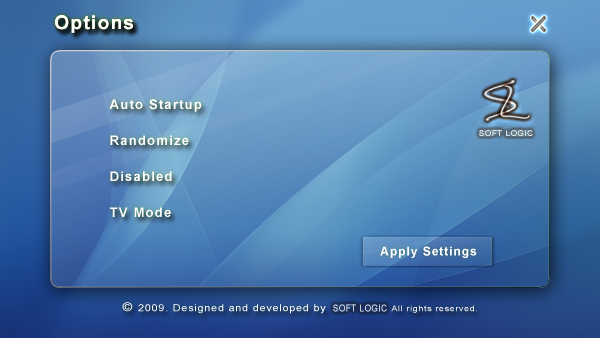
<style>
.page{position:relative;width:600px;height:338px}
.page>*{position:absolute;margin:0}
.t1{font:18.7px "Arial-BoldMT";letter-spacing:0.08em;color:#fefefe}
.t2{font:13.3px/18px "Arial-BoldMT";letter-spacing:0.08em;color:#fefefe}
.t3{font:8px "ArialMT";letter-spacing:0.08em}
.t4{font:12px "Arial-BoldMT";letter-spacing:0.08em;color:#ffffff}
.t5{font:9.7px "ArialMT";letter-spacing:0.08em;color:#fefefe;scale:1.1 1}
.t6{font:12px "ArialMT";letter-spacing:0.08em;color:#fefefe;scale:1.1 1}
.t7{font:9.8px "ArialMT";letter-spacing:0.08em;scale:0.82 1}
.t8{font:8px "ArialMT";letter-spacing:0.08em;scale:1.1 1}
</style>
<div class="page">
<p class="t1" style="left:55px;top:15px;width:78px;height:18px">Options</p>
<p class="t1" style="left:55px;top:15px;width:78px;height:18px">Options</p>
<p class="t1" style="left:55px;top:15px;width:78px;height:18px">Options</p>
<p class="t2" style="left:109px;top:99px;width:93px;height:118px">Auto Startup<br><br>Randomize<br><br>Disabled<br><br>TV Mode</p>
<p class="t3" style="left:479px;top:130px;width:54px;height:6px">SOFT LOGIC</p>
<p class="t4" style="left:380px;top:246px;width:97px;height:12px">Apply Settings</p>
<p class="t5" style="left:122px;top:302px;width:204px;height:12px"><span class="t6">© </span>2009. Designed and developed by</p>
<p class="t7" style="left:333px;top:304px;width:54px;height:8px">SOFT LOGIC</p>
<p class="t8" style="left:391px;top:305px;width:86px;height:8px">All rights reserved.</p>
</div>
